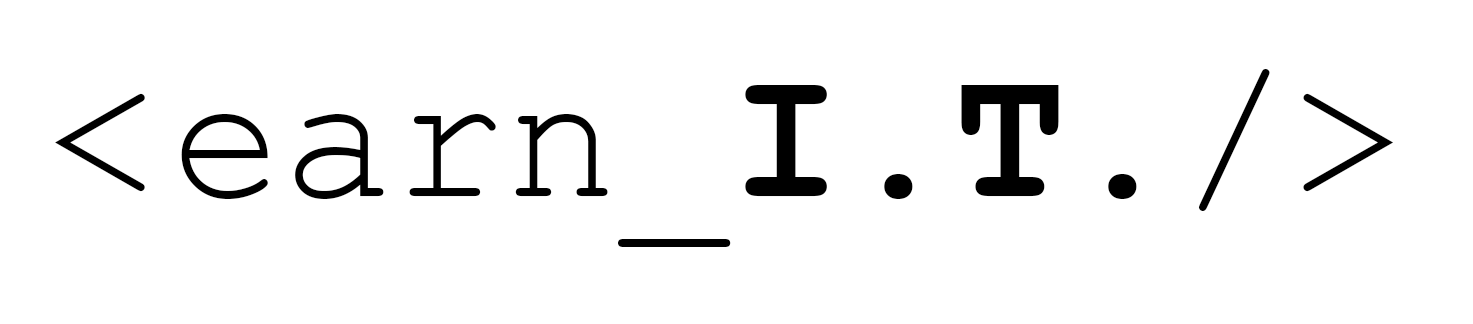
<style>
.page{position:relative;width:1473px;height:324px;background:#ffffff}
.page>*{position:absolute;margin:0}
.t1{font:186.5px "CourierNewPSMT";color:#000000}
.t2{font:186.5px "CourierNewPSMT";letter-spacing:0.065em;color:#000000}
.t3{font:186.5px "CourierNewPS-BoldMT";color:#000000}
</style>
<div class="page">
<p class="t1" style="left:55px;top:69px;width:1339px;height:178px"><span class="t2">&lt;</span>earn_<span class="t3">I.T.</span>/&gt;</p>
</div>
